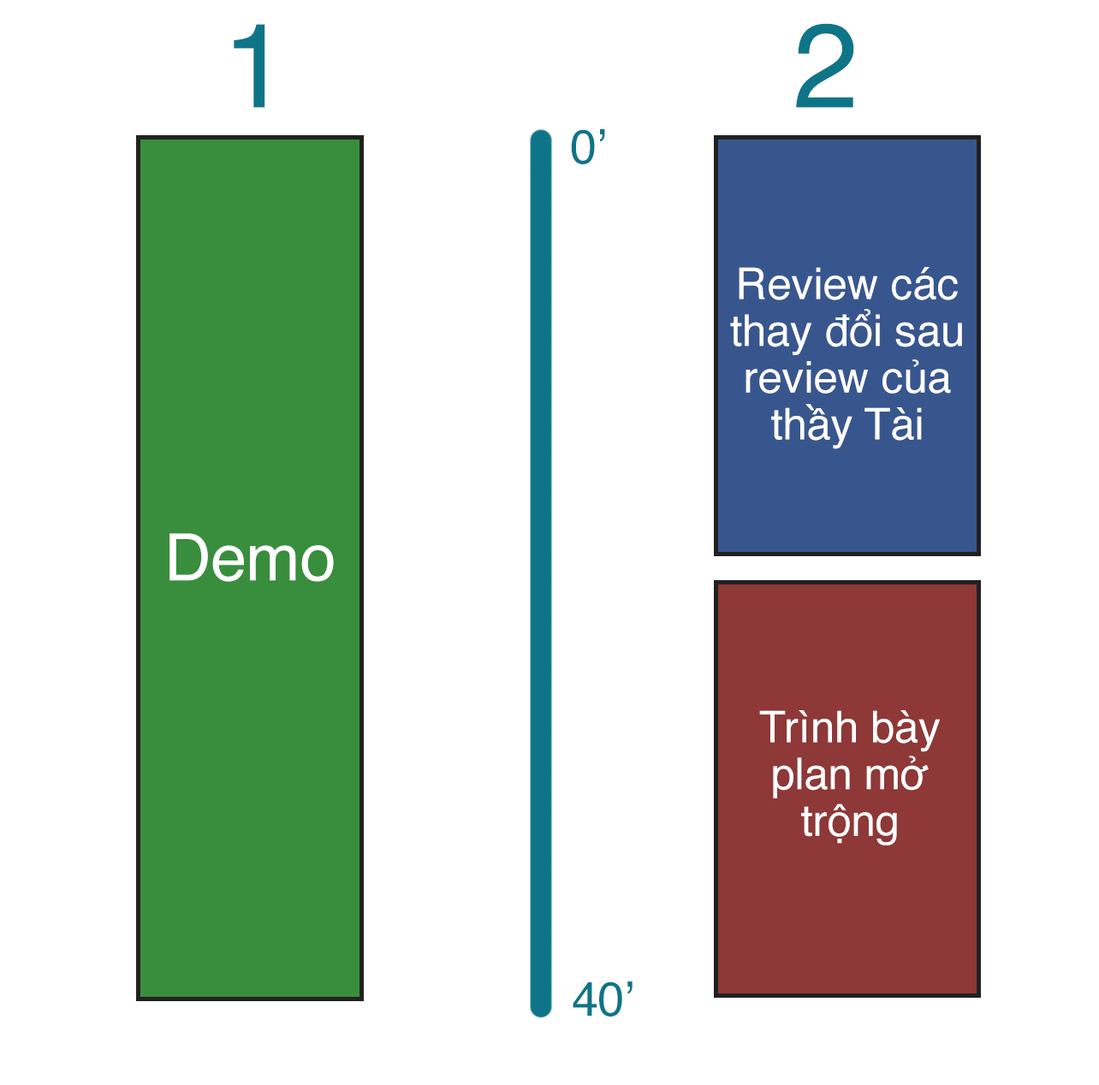
<style>
.page{position:relative;width:1099px;height:1085px;background:#ffffff}
.page>*{position:absolute;margin:0}
.t1{font:119px "Helvetica";color:#0e7588}
.t2{font:47.7px "Helvetica";color:#0e7588}
.t3{font:43.6px/46.7px "Helvetica";color:#ffffff}
.t4{font:65.1px "Helvetica";color:#ffffff}
</style>
<div class="page">
<p class="t1" style="left:234px;top:24px;width:31px;height:84px">1</p>
<p class="t1" style="left:796px;top:23px;width:58px;height:85px">2</p>
<p class="t2" style="left:571px;top:129px;width:34px;height:35px">0’</p>
<p class="t3" style="left:730px;top:267px;width:232px;height:182px;text-align:center">Review các thay đổi sau review của thầy Tài</p>
<p class="t4" style="left:169px;top:533px;width:165px;height:49px">Demo</p>
<p class="t3" style="left:759px;top:710px;width:181px;height:136px;text-align:center">Trình bày plan mở trộng</p>
<p class="t2" style="left:573px;top:982px;width:59px;height:35px">40’</p>
</div>
